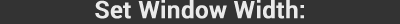
<style>
.page{position:relative;width:400px;height:24px;background:#333333}
.page>*{position:absolute;margin:0}
.t1{font:23.7px "Roboto-Medium";color:#eaeaea;font-weight:bold}
</style>
<div class="page">
<p class="t1" style="left:95px;top:0px;width:209px;height:19px">Set Window Width:</p>
</div>
